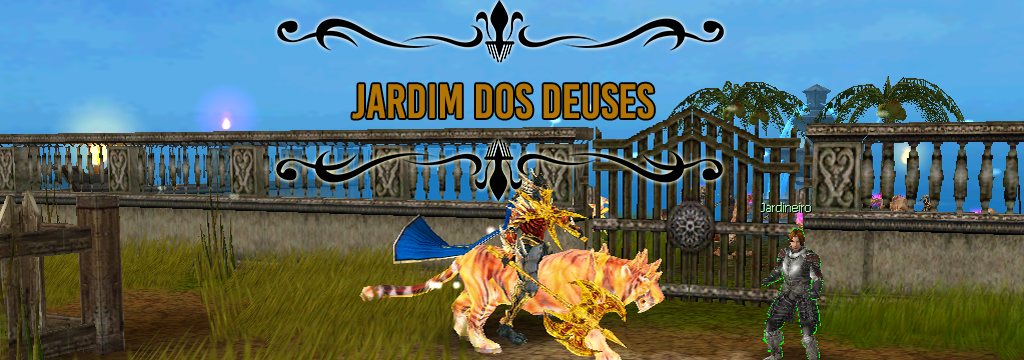
<style>
.page{position:relative;width:1024px;height:360px}
.page>*{position:absolute;margin:0}
.t1{font:48px "BebasKai";color:#b07504}
</style>
<div class="page">
<p class="t1" style="left:352px;top:83px;width:302px;height:36px">jardim dos deuses</p>
</div>
